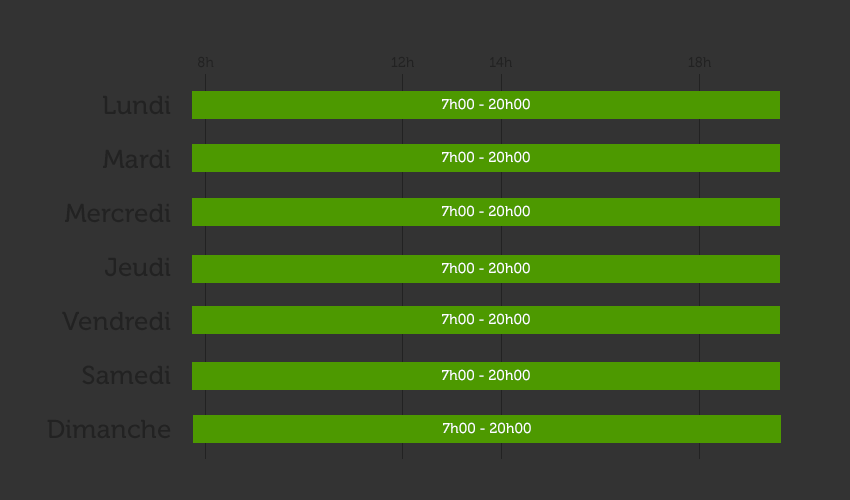
<style>
.page{position:relative;width:850px;height:500px;background:#333333}
.page>*{position:absolute;margin:0}
.t1{font:14px "Museo-500";color:#222222}
.t2{font:26px/54px "Museo-500";color:#222222}
.t3{font:14px "Museo-500";color:#ffffff}
</style>
<div class="page">
<p class="t1" style="left:198px;top:56px;width:16px;height:12px">8h</p>
<p class="t1" style="left:391px;top:56px;width:23px;height:11px">12h</p>
<p class="t1" style="left:490px;top:57px;width:22px;height:10px">14h</p>
<p class="t1" style="left:688px;top:56px;width:23px;height:12px">18h</p>
<p class="t2" style="left:47px;top:95px;width:124px;height:344px;text-align:right">Lundi<br>Mardi<br>Mercredi<br>Jeudi<br>Vendredi<br>Samedi<br>Dimanche</p>
<p class="t3" style="left:442px;top:98px;width:88px;height:12px">7h00 - 20h00</p>
<p class="t3" style="left:442px;top:151px;width:88px;height:12px">7h00 - 20h00</p>
<p class="t3" style="left:442px;top:205px;width:88px;height:12px">7h00 - 20h00</p>
<p class="t3" style="left:442px;top:262px;width:88px;height:12px">7h00 - 20h00</p>
<p class="t3" style="left:442px;top:313px;width:88px;height:12px">7h00 - 20h00</p>
<p class="t3" style="left:442px;top:369px;width:88px;height:12px">7h00 - 20h00</p>
<p class="t3" style="left:443px;top:422px;width:88px;height:12px">7h00 - 20h00</p>
</div>
